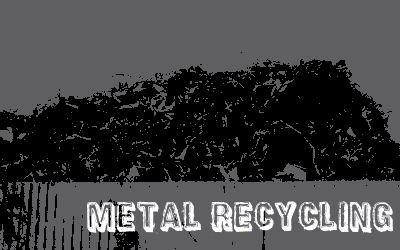
<style>
.page{position:relative;width:400px;height:250px;background:#5f5f62}
.page>*{position:absolute;margin:0}
.t1{font:36px "District";color:#ffffff}
</style>
<div class="page">
<p class="t1" style="left:86px;top:200px;width:308px;height:35px">METAL RECYCLING</p>
</div>
